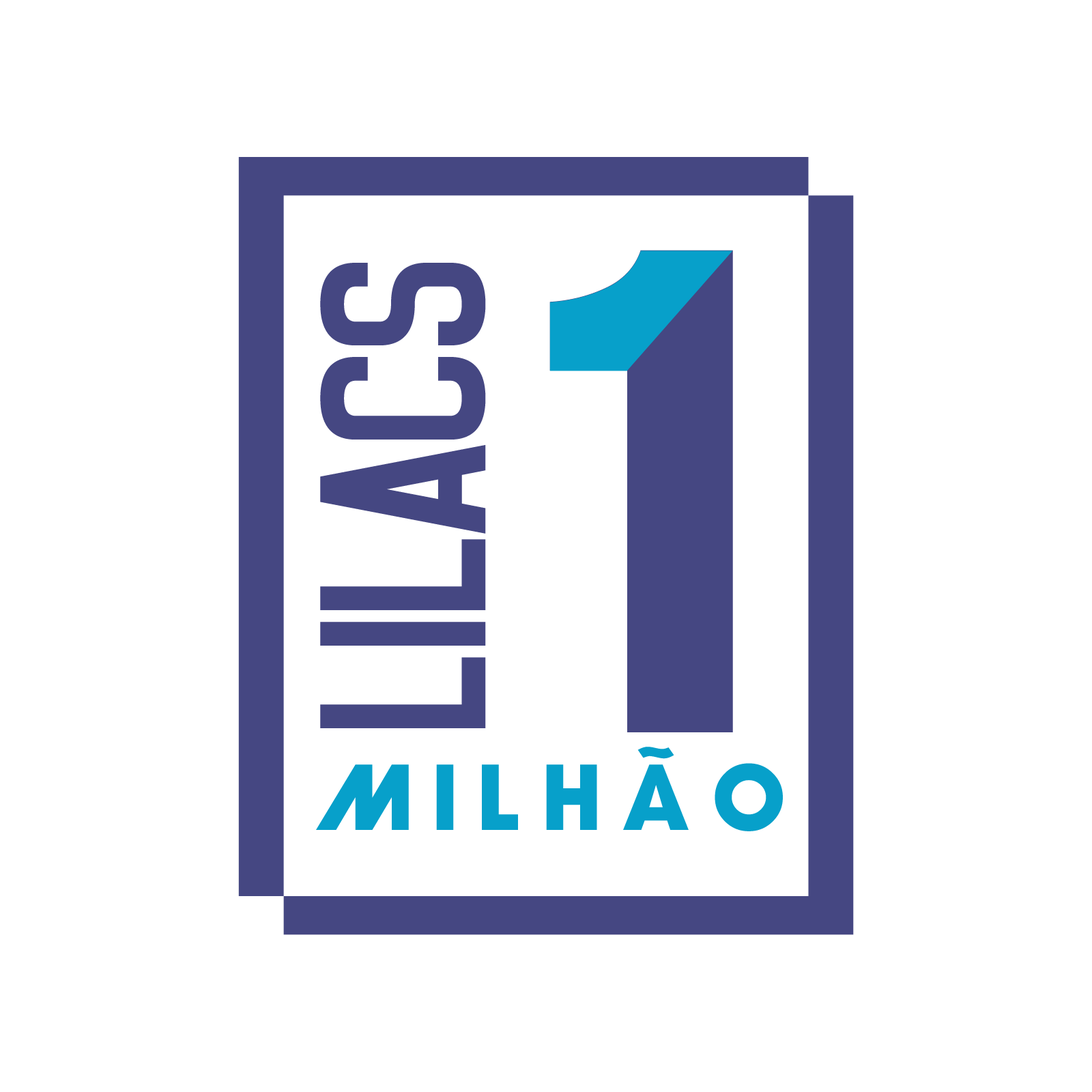
<style>
.page{position:relative;width:1092px;height:1092px;background:#ffffff}
.page>*{position:absolute;margin:0}
.t1{font:613.1px "HelveticaInserat";letter-spacing:0.1em;color:#454782}
.t2{font:241.5px "Noasarck";color:#454782}
.t3{font:88.2px "RedeGlobo-Bold";letter-spacing:0.26em;color:#07a0ca}
</style>
<div class="page">
<p class="t1" style="left:549px;top:250px;width:184px;height:482px">1</p>
<p class="t2" style="left:320px;top:263px;width:166px;height:465px;rotate:-90deg">LILACS</p>
<p class="t3" style="left:316px;top:747px;width:467px;height:84px">milhÃo</p>
</div>
